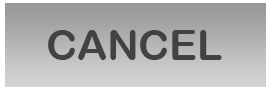
<style>
.page{position:relative;width:270px;height:90px}
.page>*{position:absolute;margin:0}
.t1{font:41.7px "ArialRoundedMTBold";color:#424242}
</style>
<div class="page">
<p class="t1" style="left:48px;top:30px;width:174px;height:30px">CANCEL</p>
</div>
